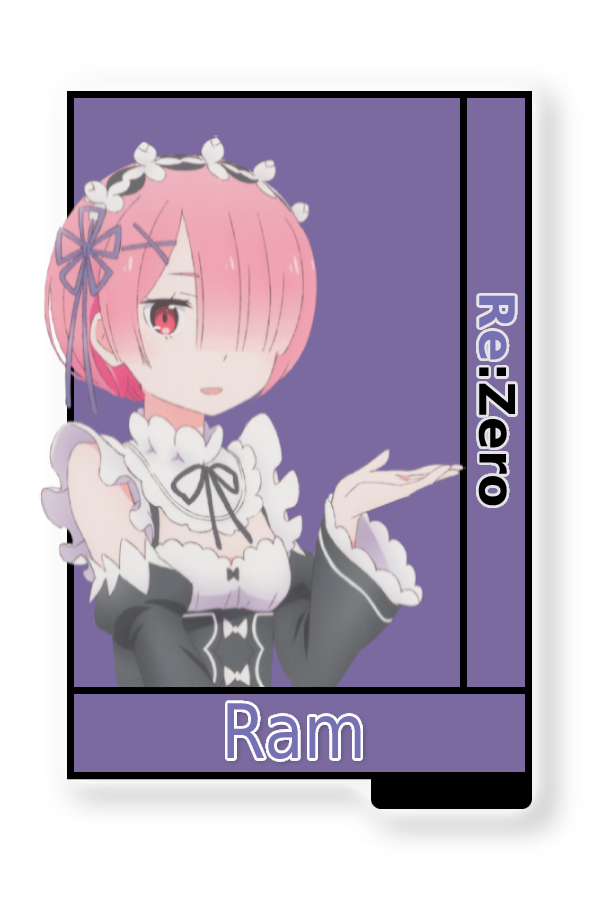
<style>
.page{position:relative;width:600px;height:900px;background:#7a6aa0}
.page>*{position:absolute;margin:0}
.t1{font:48.8px "MADETOMMY-Bold";color:#000000}
.t2{font:48.8px "MADETOMMY-Bold";color:#7671b3}
.t3{font:75px "CoolveticaRg-Regular";color:#7671b3;scale:0.85 1}
</style>
<div class="page">
<p class="t1" style="left:478px;top:295px;width:37px;height:211px;rotate:90deg"><span class="t2">Re</span>:Zero</p>
<p class="t3" style="left:227px;top:703px;width:134px;height:56px">Ram</p>
</div>
